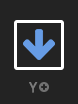
<style>
.page{position:relative;width:78px;height:104px;background:#232323}
.page>*{position:absolute;margin:0}
.t1{font:14px "SegoeUI";color:#7c7c7c;font-weight:bold}
</style>
<div class="page">
<p class="t1" style="left:29px;top:82px;width:9px;height:11px">Y</p>
</div>
